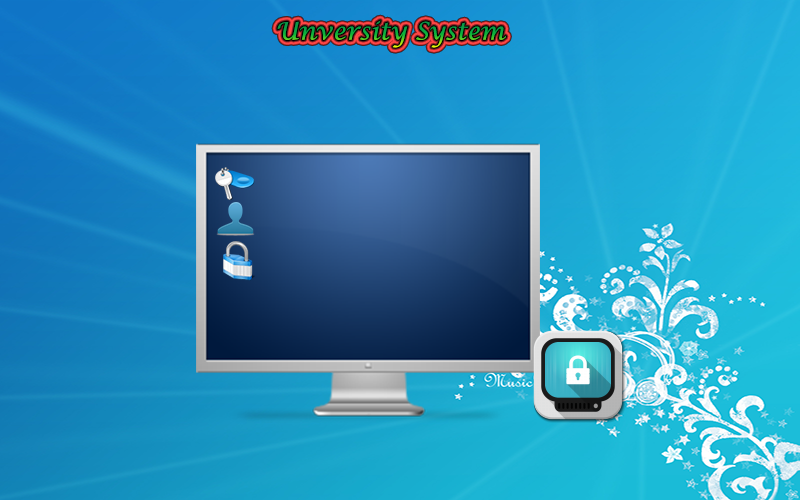
<style>
.page{position:relative;width:800px;height:500px}
.page>*{position:absolute;margin:0}
.t1{font:24px "LucidaCalligraphy-Italic"}
</style>
<div class="page">
<p class="t1" style="left:277px;top:20px;width:229px;height:28px">Unversity System</p>
</div>
